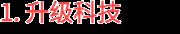
<style>
.page{position:relative;width:180px;height:34px;background:#000000}
.page>*{position:absolute;margin:0}
.t1{font:24px "WebPSD-18463539-0-Regular";color:#ef4b4b;font-weight:bold}
</style>
<div class="page">
<p class="t1" style="left:0px;top:0px;width:180px;height:34px">1. 升级科技</p>
</div>
